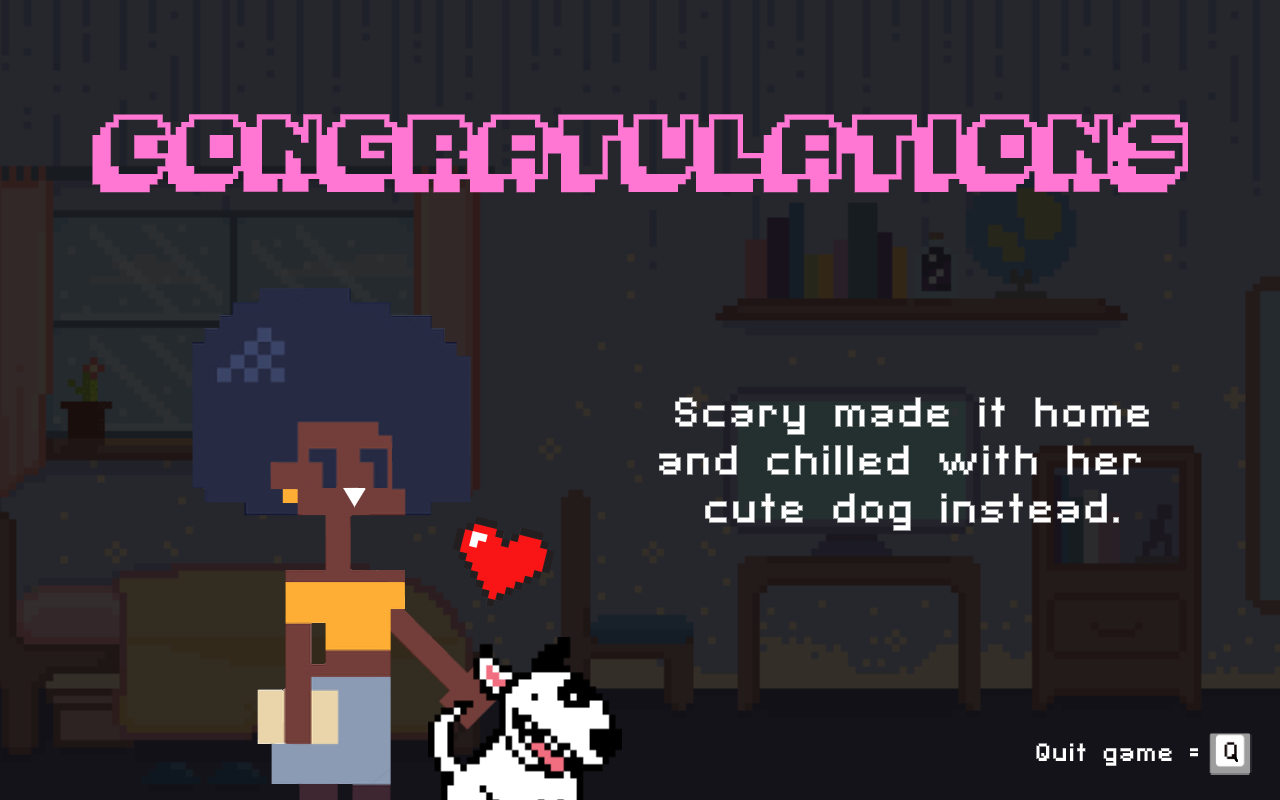
<style>
.page{position:relative;width:1280px;height:800px;background:#26262d}
.page>*{position:absolute;margin:0}
.t1{font:50px "Pixelmania";color:#ff77d2}
.t2{font:40px "SFPixelate-Bold";color:#ffffff}
.t3{font:24px "SFPixelate-Bold";color:#ffffff}
</style>
<div class="page">
<p class="t1" style="left:92px;top:114px;width:1096px;height:79px">CONGRATULATIONS</p>
<p class="t2" style="left:659px;top:397px;width:490px;height:134px;text-align:center">Scary made it home<br>and chilled with her <br>cute dog instead.</p>
<p class="t3" style="left:1036px;top:743px;width:162px;height:23px">Quit game =</p>
</div>
